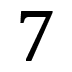
<style>
.page{position:relative;width:72px;height:72px;background:#ffffff}
.page>*{position:absolute;margin:0}
.t1{font:75px "CambriaMath";color:#000000}
</style>
<div class="page">
<p class="t1" style="left:20px;top:11px;width:33px;height:50px">7</p>
</div>
